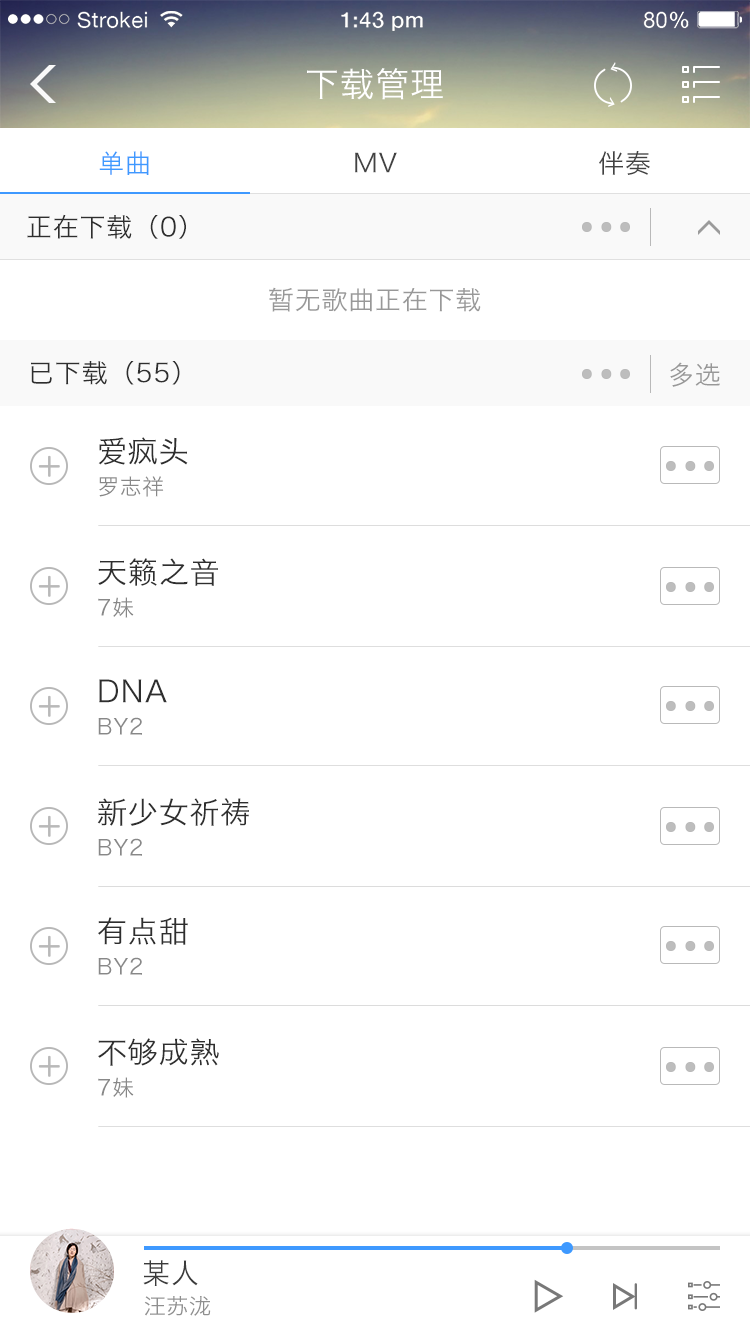
<style>
.page{position:relative;width:750px;height:1334px;background:#ffffff}
.page>*{position:absolute;margin:0}
.t1{font:33.9px "HiraginoSansGB-W3";letter-spacing:0.03em;color:#ffffff}
.t2{font:26px "HiraginoSansGB-W3";letter-spacing:0.03em;color:#3e99ff}
.t3{font:25.7px "HiraginoSansGB-W3";letter-spacing:0.03em;color:#424242}
.t4{font:26px "HiraginoSansGB-W3";letter-spacing:0.03em;color:#424242}
.t5{font:26px "HiraginoSansGB-W3";letter-spacing:0.03em;color:#2e2e2e}
.t6{font:25.7px "HiraginoSansGB-W3";letter-spacing:0.03em;color:#989898}
.t7{font:25.7px "HiraginoSansGB-W3";letter-spacing:0.03em;color:#2e2e2e}
.t8{font:29.9px "HiraginoSansGB-W3";letter-spacing:0.03em;color:#2e2e2e}
.t9{font:21.9px "HiraginoSansGB-W3";letter-spacing:0.03em;color:#888888}
.t10{font:28px "HiraginoSansGB-W3";letter-spacing:0.03em;color:#3b3b3b}
.t11{font:22px "HiraginoSansGB-W3";letter-spacing:0.03em;color:#8f8f8f}
</style>
<div class="page">
<p class="t1" style="left:307px;top:68px;width:136px;height:32px">下载管理</p>
<p class="t2" style="left:99px;top:151px;width:50px;height:24px">单曲</p>
<p class="t3" style="left:355px;top:152px;width:42px;height:21px">MV</p>
<p class="t4" style="left:599px;top:151px;width:51px;height:24px">伴奏</p>
<p class="t5" style="left:27px;top:214px;width:159px;height:25px">正在下载（0）</p>
<p class="t6" style="left:269px;top:287px;width:212px;height:25px">暂无歌曲正在下载</p>
<p class="t7" style="left:31px;top:361px;width:149px;height:24px">已下载（55）</p>
<p class="t6" style="left:670px;top:362px;width:50px;height:25px">多选</p>
<p class="t8" style="left:98px;top:437px;width:90px;height:28px">爱疯头</p>
<p class="t9" style="left:99px;top:476px;width:65px;height:21px">罗志祥</p>
<p class="t8" style="left:98px;top:558px;width:120px;height:28px">天籁之音</p>
<p class="t9" style="left:98px;top:597px;width:36px;height:21px">7妹</p>
<p class="t8" style="left:99px;top:679px;width:68px;height:24px">DNA</p>
<p class="t9" style="left:98px;top:717px;width:44px;height:18px">BY2</p>
<p class="t8" style="left:97px;top:798px;width:152px;height:28px">新少女祈祷</p>
<p class="t9" style="left:98px;top:838px;width:44px;height:18px">BY2</p>
<p class="t8" style="left:98px;top:917px;width:90px;height:28px">有点甜</p>
<p class="t9" style="left:98px;top:957px;width:44px;height:18px">BY2</p>
<p class="t8" style="left:98px;top:1038px;width:121px;height:28px">不够成熟</p>
<p class="t9" style="left:98px;top:1077px;width:36px;height:21px">7妹</p>
<p class="t10" style="left:143px;top:1260px;width:55px;height:26px">某人</p>
<p class="t11" style="left:144px;top:1296px;width:67px;height:20px">汪苏泷</p>
</div>
